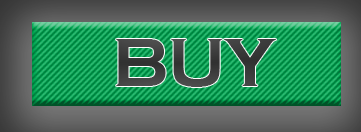
<style>
.page{position:relative;width:361px;height:132px}
.page>*{position:absolute;margin:0}
.t1{font:70px "CopperplateGothic-Bold";color:#3f3f3f}
</style>
<div class="page">
<p class="t1" style="left:116px;top:39px;width:160px;height:48px">BUY</p>
</div>
